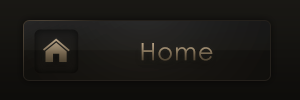
<style>
.page{position:relative;width:300px;height:100px}
.page>*{position:absolute;margin:0}
.t1{font:24px "CenturyGothic";letter-spacing:0.05em}
</style>
<div class="page">
<p class="t1" style="left:141px;top:43px;width:72px;height:18px">Home</p>
</div>
